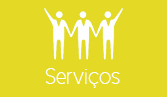
<style>
.page{position:relative;width:167px;height:97px;background:#e4d925}
.page>*{position:absolute;margin:0}
.t1{font:22.7px "CicleFina";color:#ffffff}
</style>
<div class="page">
<p class="t1" style="left:45px;top:68px;width:75px;height:20px">Serviços</p>
</div>
